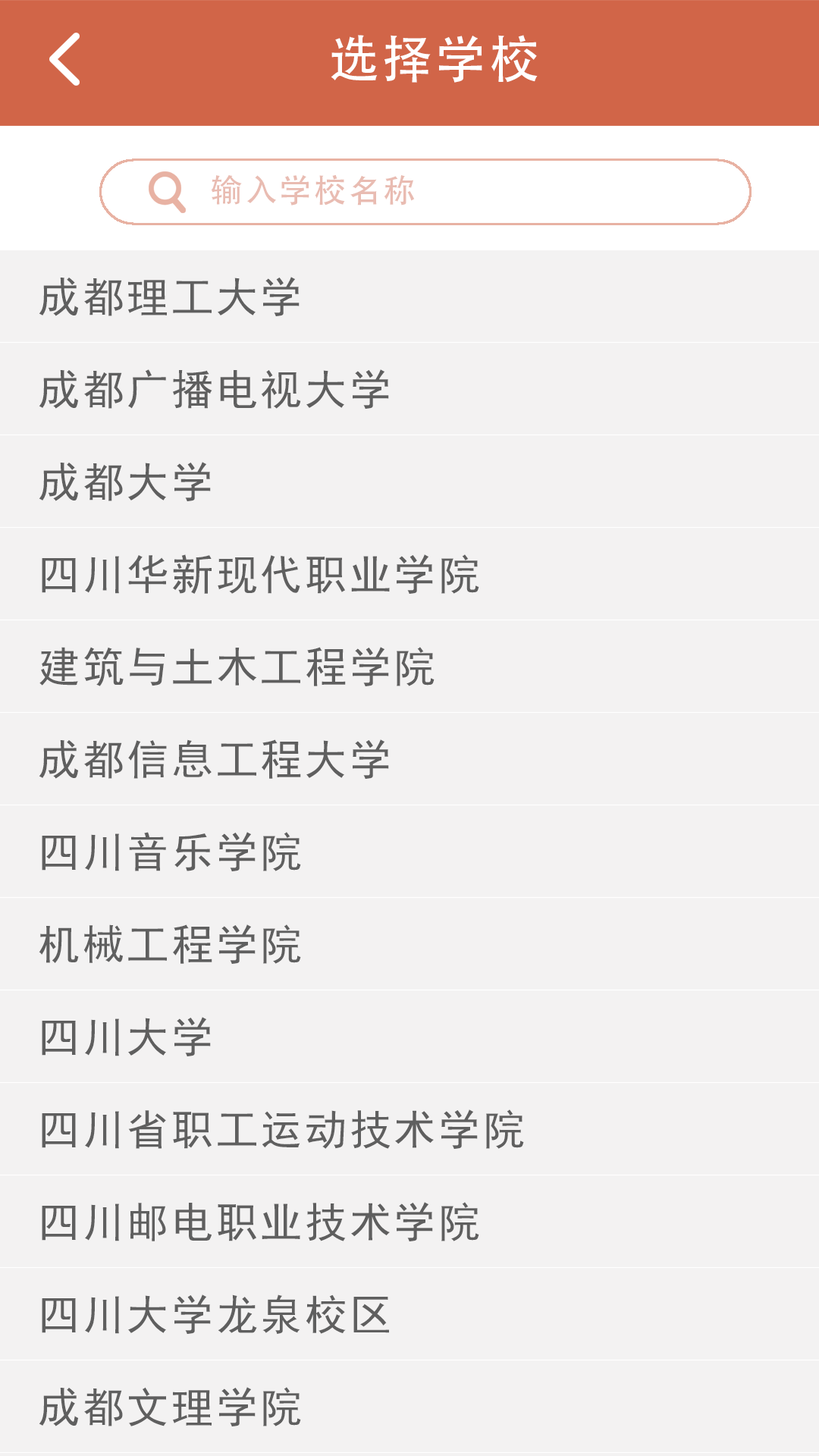
<style>
.page{position:relative;width:819px;height:1456px;background:#f3f2f2}
.page>*{position:absolute;margin:0}
.t1{font:50.8px "AdobeHeitiStd-Regular";letter-spacing:0.06em;color:#ffffff}
.t2{font:32.6px "AdobeHeitiStd-Regular";letter-spacing:0.06em;color:#e9bcb2}
.t3{font:41.8px "SimHei";letter-spacing:0.06em;color:#5f5f5f}
</style>
<div class="page">
<p class="t1" style="left:331px;top:35px;width:207px;height:48px">选择学校</p>
<p class="t2" style="left:211px;top:174px;width:204px;height:32px">输入学校名称</p>
<p class="t3" style="left:39px;top:277px;width:261px;height:39px">成都理工大学</p>
<p class="t3" style="left:39px;top:369px;width:350px;height:40px">成都广播电视大学</p>
<p class="t3" style="left:39px;top:462px;width:172px;height:39px">成都大学</p>
<p class="t3" style="left:42px;top:554px;width:437px;height:40px">四川华新现代职业学院</p>
<p class="t3" style="left:39px;top:647px;width:396px;height:39px">建筑与土木工程学院</p>
<p class="t3" style="left:39px;top:739px;width:350px;height:40px">成都信息工程大学</p>
<p class="t3" style="left:42px;top:832px;width:259px;height:39px">四川音乐学院</p>
<p class="t3" style="left:39px;top:924px;width:262px;height:40px">机械工程学院</p>
<p class="t3" style="left:42px;top:1017px;width:169px;height:39px">四川大学</p>
<p class="t3" style="left:42px;top:1109px;width:482px;height:40px">四川省职工运动技术学院</p>
<p class="t3" style="left:42px;top:1202px;width:437px;height:39px">四川邮电职业技术学院</p>
<p class="t3" style="left:42px;top:1294px;width:347px;height:40px">四川大学龙泉校区</p>
<p class="t3" style="left:39px;top:1387px;width:262px;height:39px">成都文理学院</p>
</div>
